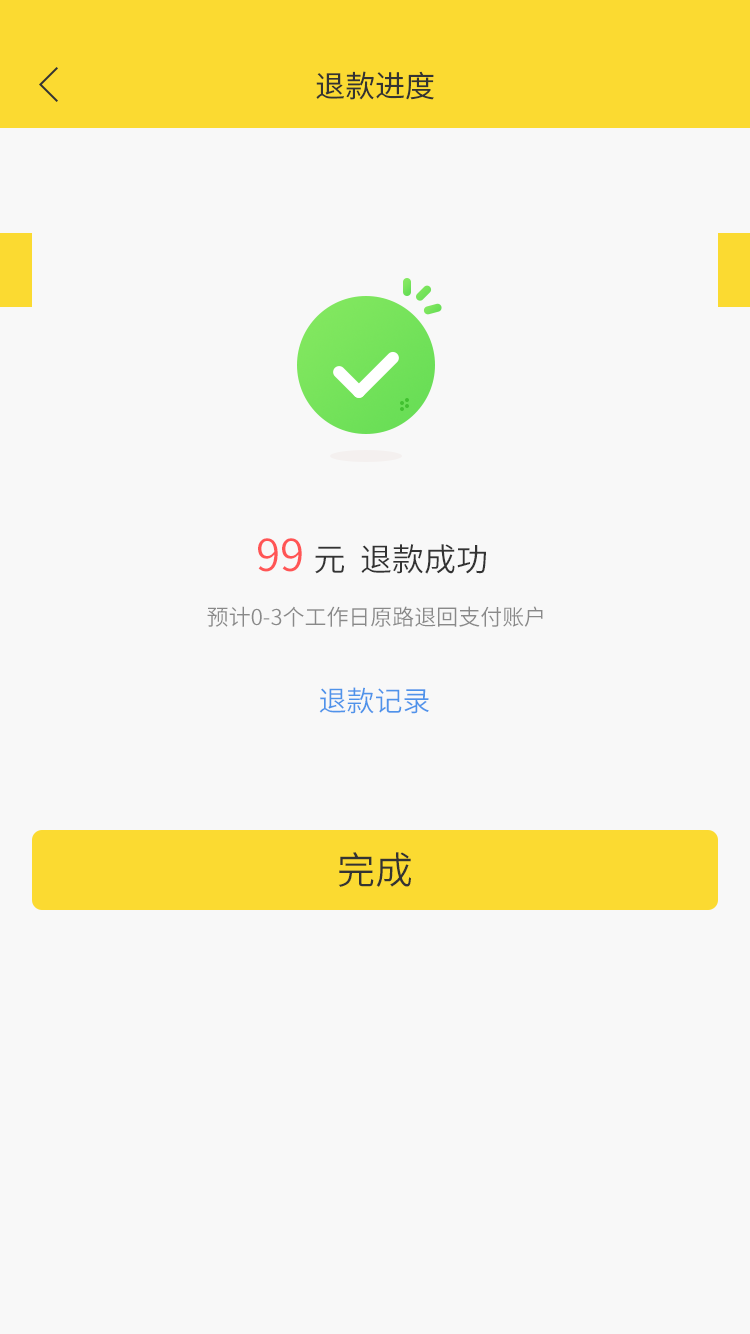
<style>
.page{position:relative;width:750px;height:1334px;background:#f8f8f8}
.page>*{position:absolute;margin:0}
.t1{font:30px "SourceHanSansSC-Normal";color:#333333}
.t2{font:44.1px "SourceHanSansSC-Normal";color:#ff5555}
.t3{font:32px "SourceHanSansSC-Normal";color:#333333}
.t4{font:22px "SourceHanSansSC-Normal";color:#898989}
.t5{font:28px "SourceHanSansSC-Normal";color:#4f93ea}
.t6{font:38px "SourceHanSansSC-Normal";color:#333333}
</style>
<div class="page">
<p class="t1" style="left:316px;top:71px;width:118px;height:29px">退款进度</p>
<p class="t2" style="left:258px;top:538px;width:44px;height:34px">99</p>
<p class="t3" style="left:315px;top:544px;width:171px;height:30px">元  退款成功</p>
<p class="t4" style="left:207px;top:606px;width:336px;height:21px">预计0-3个工作日原路退回支付账户</p>
<p class="t5" style="left:319px;top:687px;width:110px;height:27px">退款记录</p>
<p class="t6" style="left:338px;top:852px;width:73px;height:35px">完成</p>
</div>
